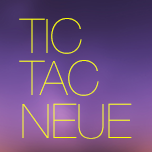
<style>
.page{position:relative;width:152px;height:152px}
.page>*{position:absolute;margin:0}
.t1{font:47.7px/42.4px "HelveticaNeue-UltraLight";color:#ffff00}
</style>
<div class="page">
<p class="t1" style="left:19px;top:18px;width:113px;height:121px">TIC<br>TAC<br>NEUE</p>
</div>
